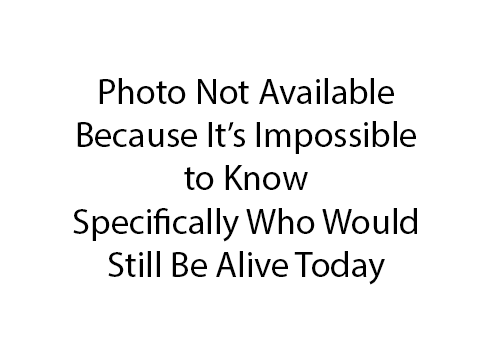
<style>
.page{position:relative;width:504px;height:360px;background:#ffffff}
.page>*{position:absolute;margin:0}
.t1{font:36px "MyriadPro-Regular";color:#000000}
</style>
<div class="page">
<p class="t1" style="left:73px;top:78px;width:344px;height:207px;text-align:center">Photo Not Available<br>Because It’s Impossible<br>to Know<br>Specifically Who Would<br>Still Be Alive Today</p>
</div>
